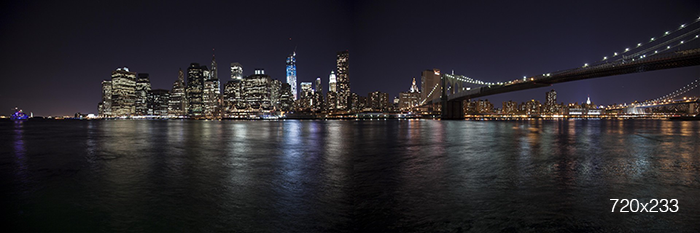
<style>
.page{position:relative;width:700px;height:233px}
.page>*{position:absolute;margin:0}
.t1{font:18.2px "Helvetica-Light";color:#ffffff}
</style>
<div class="page">
<p class="t1" style="left:610px;top:199px;width:69px;height:13px">720x233</p>
</div>
